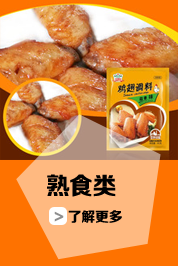
<style>
.page{position:relative;width:178px;height:266px}
.page>*{position:absolute;margin:0}
.t1{font:14px/36px "FZZDHJW--GB1-0";color:#000000}
.t2{font:24px/36px "FZZDHJW--GB1-0";color:#000000}
.t3{font:14px/36px "FZZDHJW--GB1-0";color:#8e8e8e}
</style>
<div class="page">
<p class="t1" style="left:47px;top:174px;width:75px;height:49px"><span class="t2">熟食类<br>  </span><span class="t3">&gt;</span> 了解更多</p>
</div>
